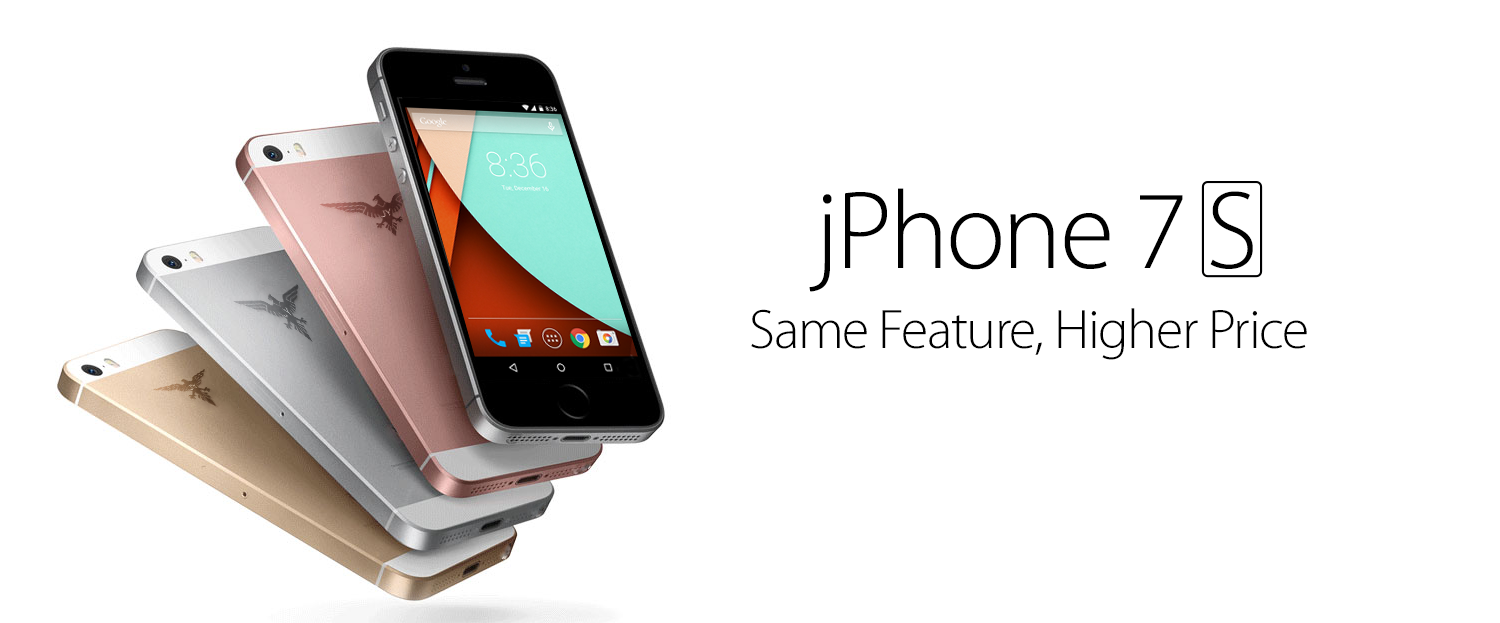
<style>
.page{position:relative;width:1500px;height:623px;background:#ffffff}
.page>*{position:absolute;margin:0}
.t1{font:112px "MyriadPro-Light";letter-spacing:-0.025em;color:#000000}
.t2{font:56px "MyriadPro-Light";letter-spacing:-0.025em;color:#000000}
</style>
<div class="page">
<p class="t1" style="left:809px;top:188px;width:444px;height:104px">jPhone 7 S</p>
<p class="t2" style="left:751px;top:308px;width:556px;height:52px">Same Feature, Higher Price</p>
</div>
